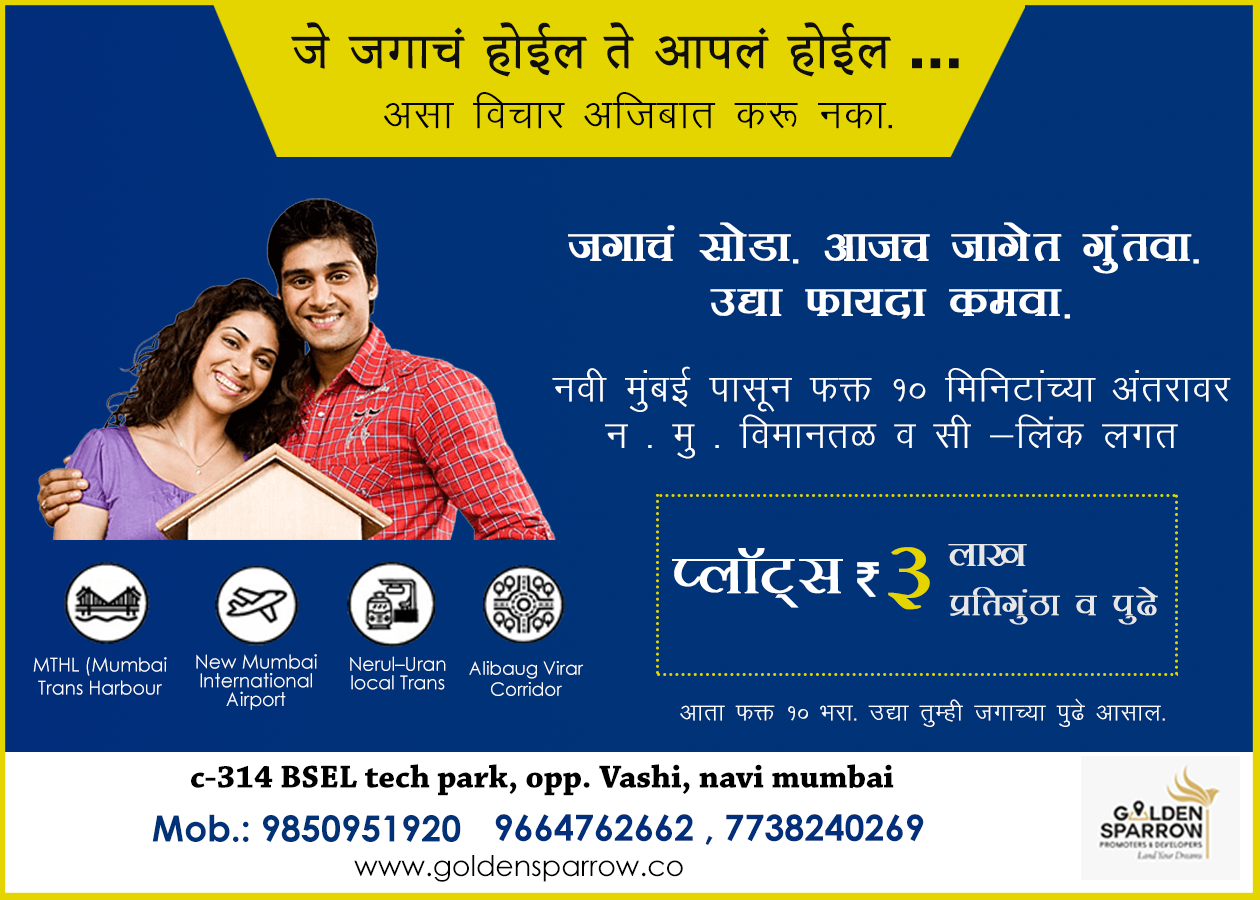
<style>
.page{position:relative;width:1260px;height:900px;background:#003378}
.page>*{position:absolute;margin:0}
.t1{font:61.5px "AdobeDevanagari-Regular";letter-spacing:0.015em;color:#0e0e0e;font-weight:bold}
.t2{font:61.5px "FranklinGothic-Demi";letter-spacing:0.015em;color:#0e0e0e;font-weight:bold}
.t3{font:48.9px "KrutiDev010";letter-spacing:0.015em;color:#000000}
.t4{font:50.5px "KrutiDev100Bold";letter-spacing:-0.005em;color:#ffffff;font-weight:bold}
.t5{font:50.5px "KrutiDev100Bold";letter-spacing:0.015em;color:#ffffff;font-weight:bold}
.t6{font:45.5px/46.6px "KrutiDev010";letter-spacing:0.015em;color:#ffffff}
.t7{font:42.5px "KrutiDev100Bold";letter-spacing:0.015em;color:#e7e7e7}
.t8{font:66.5px "KrutiDev100Bold";letter-spacing:0.015em;color:#ffffff}
.t9{font:101.5px "KrutiDev100Bold";letter-spacing:0.015em;color:#e4d400}
.t10{font:37.5px "KrutiDev100Bold";letter-spacing:0.015em;color:#e7e7e7}
.t11{font:18.9px/18.7px "CenturyGothic";letter-spacing:-0.005em;color:#ffffff}
.t12{font:18.9px/22.8px "CenturyGothic";letter-spacing:-0.005em;color:#ffffff}
.t13{font:18.5px/20.9px "CenturyGothic";letter-spacing:-0.005em;color:#ffffff}
.t14{font:28.4px "KrutiDev010";letter-spacing:0.015em;color:#ffffff}
.t15{font:33.5px "ChaparralPro-Bold";letter-spacing:-0.005em;color:#000000}
.t16{font:36.2px "CenturyGothic-Bold";letter-spacing:-0.005em;color:#003278}
.t17{font:36.2px "CenturyGothic-Bold";letter-spacing:-0.005em;color:#012f7b}
.t18{font:28.5px "CenturyGothic";letter-spacing:-0.005em;color:#000000}
</style>
<div class="page">
<p class="t1" style="left:291px;top:22px;width:668px;height:55px">जे जगाचं होईल ते आपलं होईल<span class="t2"> ...</span></p>
<p class="t3" style="left:384px;top:92px;width:508px;height:37px">vlk fopkj vftckr d: udk-</p>
<p class="t4" style="left:568px;top:222px;width:631px;height:52px">txkpa lksMk- vktp tkxsr xqarok-</p>
<p class="t5" style="left:710px;top:289px;width:360px;height:30px">m|k Qk;nk deok-</p>
<p class="t6" style="left:552px;top:366px;width:679px;height:93px;text-align:center">uoh eqacbZ iklwu Qä ƒå fefuVkaP;k varjkoj u - eq - foekurG o lh &amp;fyad yxr</p>
<p class="t7" style="left:948px;top:544px;width:79px;height:22px">yk[k</p>
<p class="t8" style="left:672px;top:548px;width:171px;height:60px">Iy‚V~l</p>
<p class="t9" style="left:888px;top:547px;width:42px;height:63px"><span class="t8"> </span>…</p>
<p class="t10" style="left:949px;top:587px;width:209px;height:38px">çfrxqaBk o iq&lt;s</p>
<p class="t11" style="left:196px;top:654px;width:121px;height:56px;text-align:center">New Mumbai International Airport</p>
<p class="t12" style="left:33px;top:657px;width:134px;height:38px;text-align:center">MTHL (Mumbai Trans Harbour Link)</p>
<p class="t11" style="left:350px;top:656px;width:96px;height:34px;text-align:center">Nerul–Uran local Trans</p>
<p class="t13" style="left:469px;top:661px;width:115px;height:35px;text-align:center">Alibaug Virar Corridor</p>
<p class="t14" style="left:680px;top:698px;width:485px;height:29px">vkrk Qä ƒå Hkjk- m|k rqEgh txkP;k iq&lt;s vklky-</p>
<p class="t15" style="left:191px;top:764px;width:703px;height:32px">c-314 BSEL tech park, opp. Vashi, navi mumbai</p>
<p class="t16" style="left:152px;top:814px;width:309px;height:28px">Mob.: 9850951920</p>
<p class="t17" style="left:495px;top:814px;width:429px;height:31px">9664762662 , 7738240269</p>
<p class="t18" style="left:354px;top:855px;width:329px;height:27px">www.goldensparrow.co</p>
</div>
